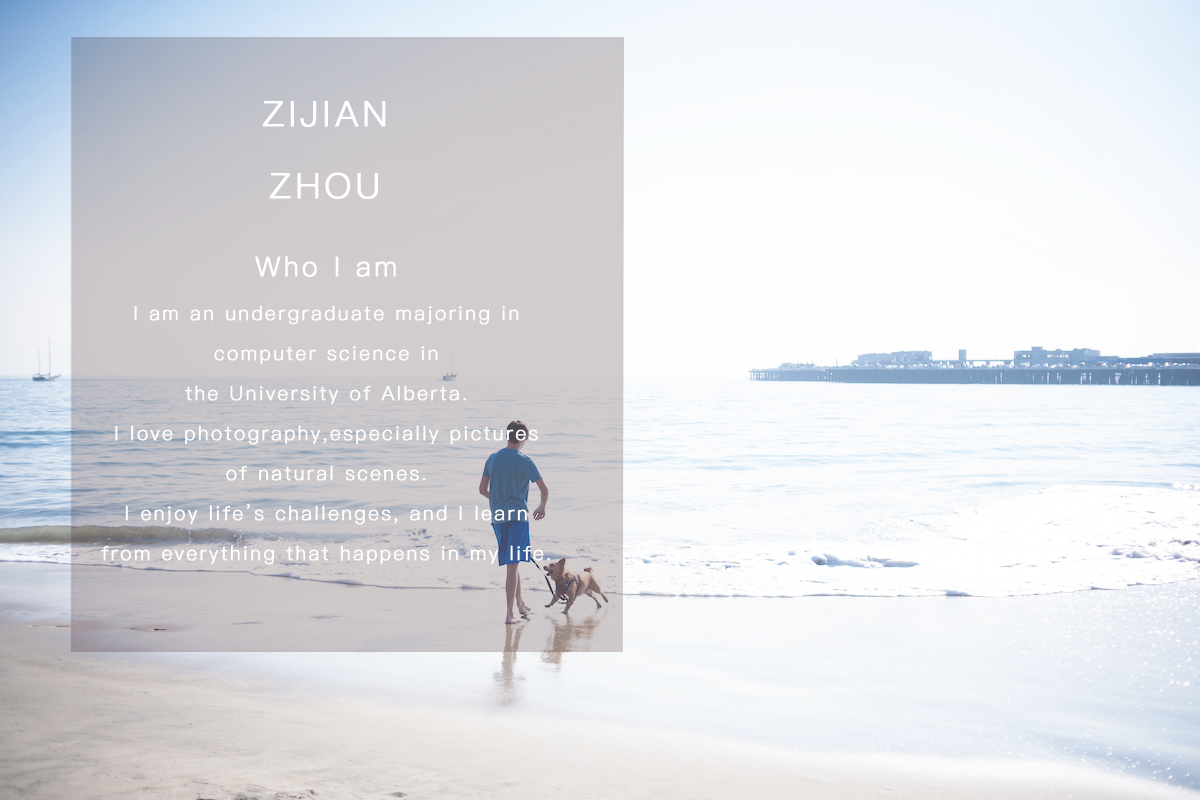
<style>
.page{position:relative;width:1200px;height:800px}
.page>*{position:absolute;margin:0}
.t1{font:60px "PingFang-SC-Regular";letter-spacing:0.1em;color:#ffffff;text-transform:uppercase;font-weight:bold}
.t2{font:33.3px "PingFang-SC-Regular";letter-spacing:0.1em;color:#ffffff;font-weight:bold}
.t3{font:46.7px "PingFang-SC-Regular";letter-spacing:0.1em;color:#ffffff;text-transform:uppercase;font-weight:bold}
.t4{font:46.7px "PingFang-SC-Regular";letter-spacing:0.1em;color:#ffffff;font-weight:bold}
</style>
<div class="page">
<p class="t1" style="left:262px;top:101px;width:124px;height:98px;text-align:center">Zijian<br>Zhou</p>
<p class="t2" style="left:100px;top:256px;width:450px;height:309px;text-align:center"><span class="t3">W</span><span class="t4">ho I am<br></span>I am an undergraduate majoring in computer science in <br>the University of Alberta.<br>I love photography,especially pictures of natural scenes.<br>I enjoy life’s challenges, and I learn from everything that happens in my life.</p>
</div>
